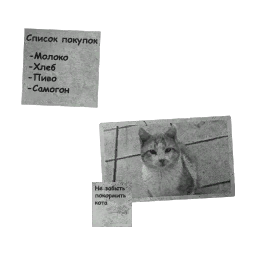
<style>
.page{position:relative;width:256px;height:256px;background:#ffffff}
.page>*{position:absolute;margin:0}
.t1{font:9px "ComicSansMS-Bold";color:#292a29}
.t2{font:9px "ComicSansMS-Bold";color:#222322}
.t3{font:6px "ComicSansMS-Bold";color:#383938}
</style>
<div class="page">
<p class="t1" style="left:26px;top:34px;width:72px;height:12px;rotate:2deg">Список покупок</p>
<p class="t2" style="left:27px;top:52px;width:43px;height:42px;rotate:3deg">-Молоко<br>-Хлеб<br>-Пиво<br>-Самогон</p>
<p class="t3" style="left:95px;top:185px;width:31px;height:20px">Не забыть<br>покормить<br>кота</p>
</div>
